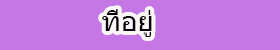
<style>
.page{position:relative;width:280px;height:50px;background:#c577e5}
.page>*{position:absolute;margin:0}
.t1{font:27.8px "Tahoma";color:#09020c}
</style>
<div class="page">
<p class="t1" style="left:102px;top:9px;width:50px;height:28px">ที่อยู่</p>
</div>
